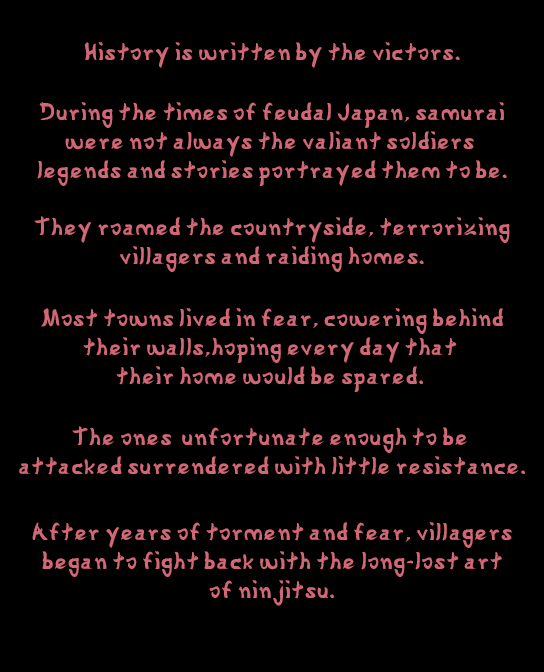
<style>
.page{position:relative;width:544px;height:672px;background:#000000}
.page>*{position:absolute;margin:0}
.t1{font:24px "Gyosho";color:#d26876}
</style>
<div class="page">
<p class="t1" style="left:84px;top:42px;width:376px;height:26px">History is written by the victors.</p>
<p class="t1" style="left:37px;top:102px;width:470px;height:84px;text-align:center">During the times of feudal Japan, samurai<br>were not always the valiant soldiers <br>legends and stories portrayed them to be.</p>
<p class="t1" style="left:34px;top:216px;width:476px;height:56px;text-align:center">They roamed the countryside, terrorizing<br>villagers and raiding homes.</p>
<p class="t1" style="left:41px;top:308px;width:462px;height:84px;text-align:center">Most towns lived in fear, cowering behind<br>their walls,hoping every day that <br>their home would be spared.</p>
<p class="t1" style="left:19px;top:426px;width:506px;height:49px;text-align:center">The ones  unfortunate enough to be <br>attacked surrendered with little resistance.</p>
<p class="t1" style="left:32px;top:522px;width:480px;height:84px;text-align:center">After years of torment and fear, villagers<br>began to fight back with the long-lost art<br>of ninjitsu.</p>
</div>
